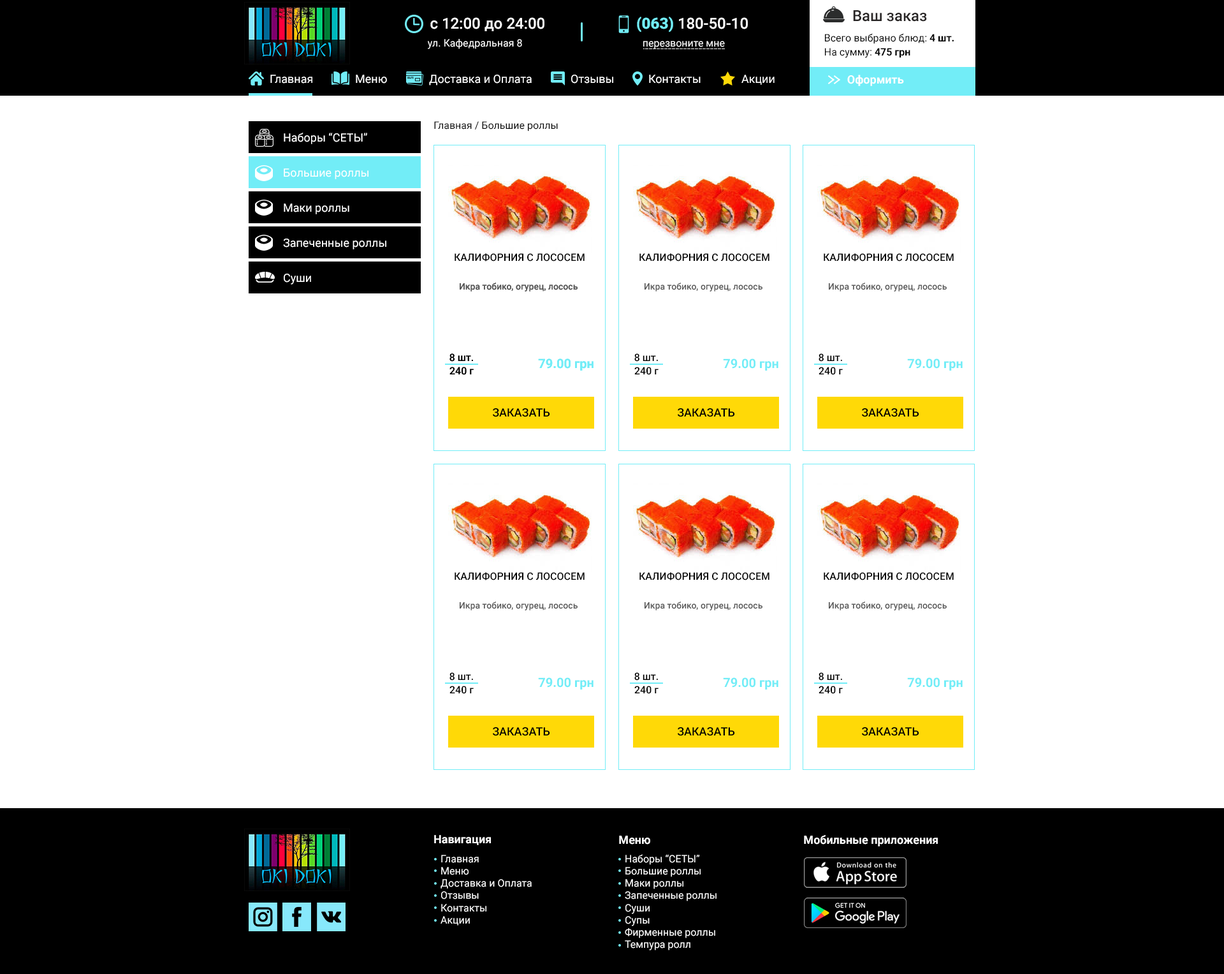
<style>
.page{position:relative;width:1224px;height:974px;background:#ffffff}
.page>*{position:absolute;margin:0}
.t1{font:15.3px "Roboto-Medium";color:#ffffff}
.t2{font:15.3px "Roboto-Black";color:#72edf7}
.t3{font:15.3px "Roboto-Medium";color:#292626}
.t4{font:10.2px "Roboto-Regular";color:#ffffff}
.t5{font:10.2px "Roboto-Regular";color:#000000}
.t6{font:10.2px "Roboto-Bold";color:#000000}
.t7{font:11.5px "Roboto-Regular";color:#ffffff}
.t8{font:11.5px "Roboto-Bold";color:#ffffff}
.t9{font:10.2px "Roboto-Medium";color:#000000}
.t10{font:8.9px "Roboto-Medium";color:#575757}
.t11{font:12.8px "Roboto-Bold";color:#72edf7}
.t12{font:11.5px "Roboto-Medium";color:#000000}
</style>
<div class="page">
<p class="t1" style="left:430px;top:17px;width:115px;height:14px">с 12:00 до 24:00</p>
<p class="t1" style="left:637px;top:17px;width:111px;height:16px"><span class="t2">(063) </span>180-50-10</p>
<p class="t3" style="left:853px;top:10px;width:74px;height:12px">Ваш заказ</p>
<p class="t4" style="left:428px;top:39px;width:94px;height:10px">ул. Кафедральная 8</p>
<p class="t4" style="left:643px;top:41px;width:82px;height:8px">перезвоните мне</p>
<p class="t5" style="left:825px;top:33px;width:129px;height:11px">Всего выбрано блюд: <span class="t6">4 шт.</span></p>
<p class="t5" style="left:825px;top:48px;width:86px;height:10px">На сумму: <span class="t6">475 грн</span></p>
<p class="t7" style="left:270px;top:75px;width:42px;height:9px">Главная</p>
<p class="t7" style="left:356px;top:75px;width:31px;height:9px">Меню</p>
<p class="t7" style="left:429px;top:75px;width:103px;height:10px">Доставка и Оплата</p>
<p class="t7" style="left:571px;top:75px;width:43px;height:9px">Отзывы</p>
<p class="t7" style="left:649px;top:75px;width:52px;height:9px">Контакты</p>
<p class="t7" style="left:742px;top:75px;width:33px;height:10px">Акции</p>
<p class="t8" style="left:848px;top:75px;width:56px;height:11px">Оформить</p>
<p class="t5" style="left:434px;top:121px;width:124px;height:10px">Главная / Большие роллы</p>
<p class="t7" style="left:284px;top:133px;width:83px;height:11px">Наборы “СЕТЫ”</p>
<p class="t7" style="left:284px;top:168px;width:85px;height:11px">Большие роллы</p>
<p class="t7" style="left:284px;top:203px;width:65px;height:11px">Маки роллы</p>
<p class="t7" style="left:283px;top:239px;width:103px;height:10px">Запеченные роллы</p>
<p class="t9" style="left:455px;top:253px;width:130px;height:8px">КАЛИФОРНИЯ С ЛОСОСЕМ</p>
<p class="t9" style="left:455px;top:253px;width:130px;height:8px">КАЛИФОРНИЯ С ЛОСОСЕМ</p>
<p class="t9" style="left:640px;top:253px;width:130px;height:8px">КАЛИФОРНИЯ С ЛОСОСЕМ</p>
<p class="t9" style="left:824px;top:253px;width:130px;height:8px">КАЛИФОРНИЯ С ЛОСОСЕМ</p>
<p class="t7" style="left:284px;top:274px;width:27px;height:10px">Суши</p>
<p class="t10" style="left:460px;top:283px;width:118px;height:8px">Икра тобико, огурец, лосось</p>
<p class="t10" style="left:460px;top:283px;width:118px;height:8px">Икра тобико, огурец, лосось</p>
<p class="t10" style="left:645px;top:283px;width:118px;height:8px">Икра тобико, огурец, лосось</p>
<p class="t10" style="left:829px;top:283px;width:118px;height:8px">Икра тобико, огурец, лосось</p>
<p class="t9" style="left:450px;top:353px;width:23px;height:9px">8 шт.</p>
<p class="t9" style="left:450px;top:353px;width:23px;height:9px">8 шт.</p>
<p class="t9" style="left:635px;top:353px;width:23px;height:9px">8 шт.</p>
<p class="t9" style="left:819px;top:353px;width:23px;height:9px">8 шт.</p>
<p class="t11" style="left:538px;top:358px;width:56px;height:13px">79.00 грн</p>
<p class="t11" style="left:538px;top:358px;width:56px;height:13px">79.00 грн</p>
<p class="t11" style="left:723px;top:358px;width:56px;height:13px">79.00 грн</p>
<p class="t11" style="left:908px;top:358px;width:55px;height:13px">79.00 грн</p>
<p class="t9" style="left:450px;top:367px;width:24px;height:8px">240 г</p>
<p class="t9" style="left:450px;top:367px;width:24px;height:8px">240 г</p>
<p class="t9" style="left:635px;top:367px;width:24px;height:8px">240 г</p>
<p class="t9" style="left:819px;top:367px;width:24px;height:8px">240 г</p>
<p class="t12" style="left:493px;top:408px;width:57px;height:9px">ЗАКАЗАТЬ</p>
<p class="t12" style="left:493px;top:408px;width:57px;height:9px">ЗАКАЗАТЬ</p>
<p class="t12" style="left:678px;top:408px;width:57px;height:9px">ЗАКАЗАТЬ</p>
<p class="t12" style="left:862px;top:408px;width:58px;height:9px">ЗАКАЗАТЬ</p>
<p class="t9" style="left:455px;top:572px;width:130px;height:8px">КАЛИФОРНИЯ С ЛОСОСЕМ</p>
<p class="t9" style="left:640px;top:572px;width:130px;height:8px">КАЛИФОРНИЯ С ЛОСОСЕМ</p>
<p class="t9" style="left:824px;top:572px;width:130px;height:8px">КАЛИФОРНИЯ С ЛОСОСЕМ</p>
<p class="t10" style="left:460px;top:601px;width:118px;height:9px">Икра тобико, огурец, лосось</p>
<p class="t10" style="left:645px;top:601px;width:118px;height:9px">Икра тобико, огурец, лосось</p>
<p class="t10" style="left:829px;top:601px;width:118px;height:9px">Икра тобико, огурец, лосось</p>
<p class="t9" style="left:450px;top:672px;width:23px;height:8px">8 шт.</p>
<p class="t11" style="left:538px;top:677px;width:56px;height:12px">79.00 грн</p>
<p class="t9" style="left:635px;top:672px;width:23px;height:8px">8 шт.</p>
<p class="t11" style="left:723px;top:677px;width:56px;height:12px">79.00 грн</p>
<p class="t9" style="left:819px;top:672px;width:23px;height:8px">8 шт.</p>
<p class="t11" style="left:908px;top:677px;width:55px;height:12px">79.00 грн</p>
<p class="t9" style="left:450px;top:686px;width:24px;height:8px">240 г</p>
<p class="t9" style="left:635px;top:686px;width:24px;height:8px">240 г</p>
<p class="t9" style="left:819px;top:686px;width:24px;height:8px">240 г</p>
<p class="t12" style="left:493px;top:727px;width:57px;height:9px">ЗАКАЗАТЬ</p>
<p class="t12" style="left:678px;top:727px;width:57px;height:9px">ЗАКАЗАТЬ</p>
<p class="t12" style="left:862px;top:727px;width:58px;height:9px">ЗАКАЗАТЬ</p>
<p class="t8" style="left:434px;top:835px;width:57px;height:10px">Навигация</p>
<p class="t8" style="left:619px;top:835px;width:31px;height:9px">Меню</p>
<p class="t8" style="left:804px;top:835px;width:134px;height:11px">Мобильные приложения</p>
<p class="t4" style="left:441px;top:855px;width:91px;height:70px">Главная<br>Меню<br>Доставка и Оплата<br>Отзывы<br>Контакты<br>Акции</p>
<p class="t4" style="left:625px;top:854px;width:92px;height:96px">Наборы “СЕТЫ”<br>Большие роллы<br>Маки роллы<br>Запеченные роллы<br>Суши<br>Супы<br>Фирменные роллы<br>Темпура ролл</p>
</div>
